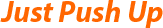
<style>
.page{position:relative;width:163px;height:28px;background:#ffffff}
.page>*{position:absolute;margin:0}
.t1{font:30px "MyriadPro-BoldIt";color:#ff6600}
</style>
<div class="page">
<p class="t1" style="left:0px;top:0px;width:163px;height:28px">Just Push Up</p>
</div>
